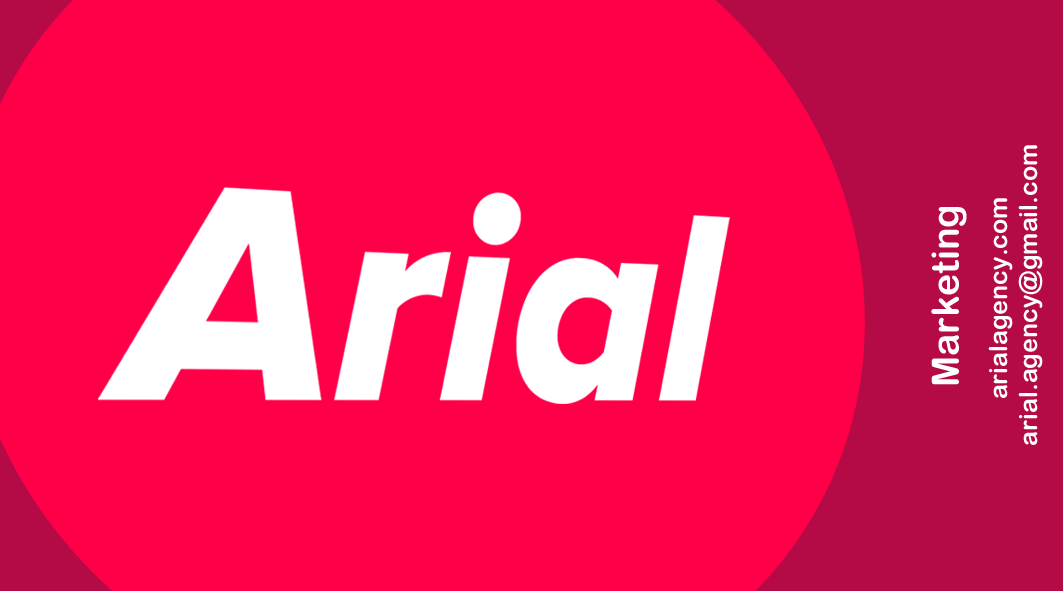
<style>
.page{position:relative;width:1063px;height:591px;background:#ff0048}
.page>*{position:absolute;margin:0}
.t1{font:25px "ArialRoundedMTBold";color:#ffffff}
.t2{font:37.5px "ArialRoundedMTBold";color:#ffffff}
</style>
<div class="page">
<p class="t1" style="left:988px;top:145px;width:55px;height:300px;text-align:center;rotate:-90deg">arialagency.com<br> arial.agency@gmail.com</p>
<p class="t2" style="left:931px;top:207px;width:36px;height:178px;rotate:-90deg">Marketing</p>
</div>
